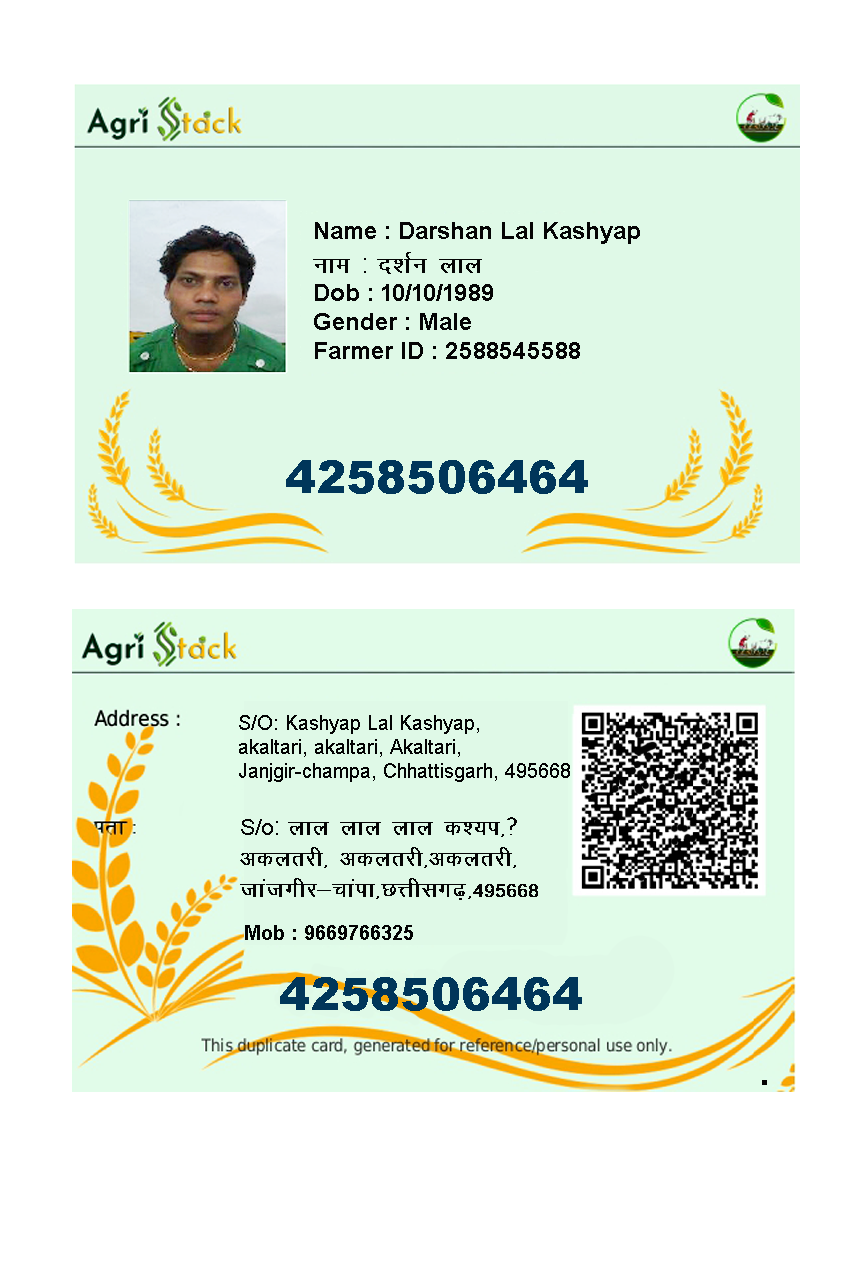
<style>
.page{position:relative;width:853px;height:1280px;background:#ffffff}
.page>*{position:absolute;margin:0}
.t1{font:24px "Arial-BoldMT";color:#050505}
.t2{font:28px "KrutiDev011";color:#050505}
.t3{font:28px "ArialMT";color:#050505}
.t4{font:45px "Arial-Black";color:#00365a}
.t5{font:20px "ArialMT";color:#030303}
.t6{font:20px "Arial-BoldMT";color:#030303}
</style>
<div class="page">
<p class="t1" style="left:313px;top:222px;width:327px;height:137px">Name : Darshan Lal Kashyap<br><span class="t2">uke </span><span class="t3">: </span><span class="t2">n’kZu yky<br></span>Dob : 10/10/1989<br>Gender : Male<br>Farmer ID : 2588545588</p>
<p class="t4" style="left:286px;top:460px;width:302px;height:34px">4258506464</p>
<p class="t5" style="left:239px;top:715px;width:331px;height:67px">S/O: Kashyap Lal Kashyap, <br>akaltari, akaltari, Akaltari, <br>Janjgir-champa, Chhattisgarh, 495668</p>
<p class="t6" style="left:245px;top:925px;width:168px;height:15px">Mob : 9669766325</p>
<p class="t4" style="left:280px;top:977px;width:302px;height:34px">4258506464</p>
</div>
